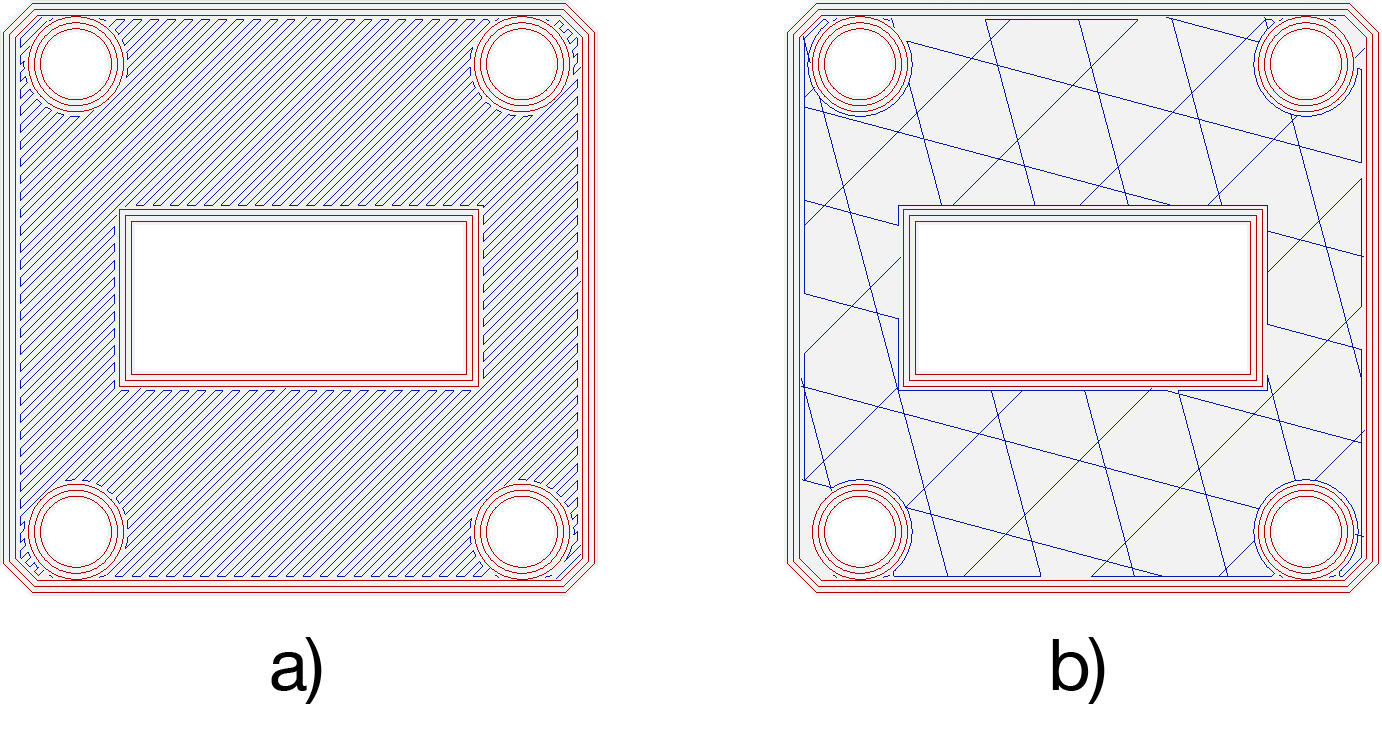
<style>
.page{position:relative;width:1382px;height:732px;background:#f2f2f2}
.page>*{position:absolute;margin:0}
.t1{font:72px "HelveticaNeue";letter-spacing:-0.022em;color:#000000}
</style>
<div class="page">
<p class="t1" style="left:271px;top:637px;width:51px;height:67px">a)</p>
<p class="t1" style="left:1052px;top:637px;width:53px;height:67px">b)</p>
</div>
